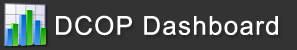
<style>
.page{position:relative;width:297px;height:50px;background:#333333}
.page>*{position:absolute;margin:0}
.t1{font:26px "ArialMT";letter-spacing:0.05em;color:#ffffff}
</style>
<div class="page">
<p class="t1" style="left:56px;top:15px;width:222px;height:21px">DCOP Dashboard</p>
</div>
